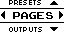
<style>
.page{position:relative;width:64px;height:32px;background:#ffffff}
.page>*{position:absolute;margin:0}
.t1{font:8px "04b03";color:#000000;scale:1.06 1}
.t2{font:14px "ArcadeClassic";color:#000000;scale:1.05 1}
</style>
<div class="page">
<p class="t1" style="left:9px;top:0px;width:32px;height:5px">PRESETS</p>
<p class="t2" style="left:13px;top:12px;width:40px;height:7px">PAGES</p>
<p class="t1" style="left:9px;top:27px;width:33px;height:5px">OUTPUTS</p>
</div>
